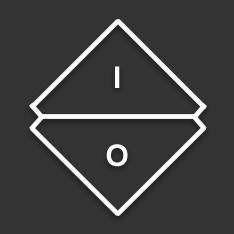
<style>
.page{position:relative;width:234px;height:234px;background:#333333}
.page>*{position:absolute;margin:0}
.t1{font:30px "Arial-BoldMT";color:#fefefe;text-transform:uppercase}
</style>
<div class="page">
<p class="t1" style="left:115px;top:66px;width:5px;height:22px">I</p>
<p class="t1" style="left:106px;top:144px;width:22px;height:23px">O</p>
</div>
